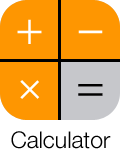
<style>
.page{position:relative;width:120px;height:149px;background:#fe9601}
.page>*{position:absolute;margin:0}
.t1{font:48px "HelveticaNeue-Light";color:#ffffff}
.t2{font:48px "HelveticaNeue-Light";color:#ffffff;scale:1.96 1}
.t3{font:48px "HelveticaNeue-Light";color:#000000}
.t4{font:23px "HelveticaNeue-Light";color:#000000}
</style>
<div class="page">
<p class="t1" style="left:17px;top:19px;width:25px;height:25px">+</p>
<p class="t2" style="left:78px;top:30px;width:25px;height:4px">-</p>
<p class="t1" style="left:20px;top:80px;width:20px;height:19px;rotate:45deg">+</p>
<p class="t3" style="left:78px;top:84px;width:25px;height:12px">=</p>
<p class="t4" style="left:11px;top:131px;width:100px;height:18px">Calculator</p>
</div>
